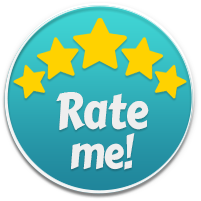
<style>
.page{position:relative;width:201px;height:201px;background:#ffffff}
.page>*{position:absolute;margin:0}
.t1{font:49.8px/39.3px "CarterOne";letter-spacing:-0.02em;color:#eeeeee;scale:0.84 1}
.t2{font:44.5px/39.3px "CarterOne";letter-spacing:-0.02em;color:#eeeeee;scale:0.84 1}
</style>
<div class="page">
<p class="t1" style="left:56px;top:92px;width:93px;height:78px;text-align:center">Rate<br><span class="t2">me!</span></p>
</div>
